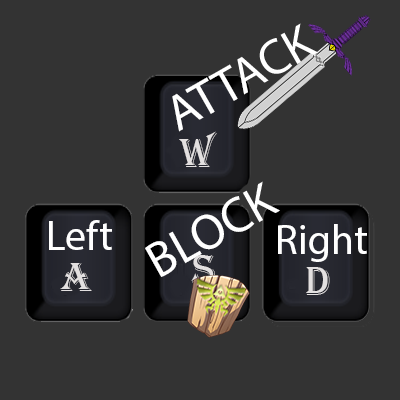
<style>
.page{position:relative;width:400px;height:400px;background:#333333}
.page>*{position:absolute;margin:0}
.t1{font:12px "MyriadPro-Regular";color:#ffffff}
.t2{font:41.7px "Algerian";color:#e3e0e0}
.t3{font:41.7px "MyriadPro-Regular";color:#ffffff}
</style>
<div class="page">
<p class="t1" style="left:172px;top:23px;width:146px;height:109px;rotate:-30deg">ATTACK</p>
<p class="t2" style="left:179px;top:131px;width:38px;height:36px">W</p>
<p class="t1" style="left:145px;top:181px;width:135px;height:96px;rotate:-29deg">BLOCK</p>
<p class="t3" style="left:49px;top:220px;width:63px;height:30px">Left</p>
<p class="t3" style="left:278px;top:224px;width:89px;height:38px">Right</p>
<p class="t2" style="left:191px;top:255px;width:24px;height:28px">S</p>
<p class="t2" style="left:60px;top:263px;width:32px;height:28px">A</p>
<p class="t2" style="left:306px;top:267px;width:24px;height:28px">D</p>
</div>
